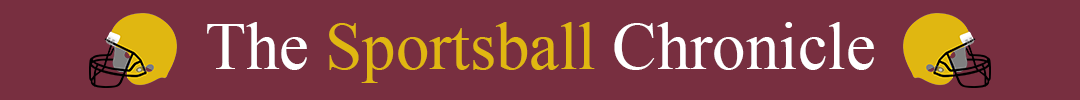
<style>
.page{position:relative;width:1080px;height:100px;background:#782f40}
.page>*{position:absolute;margin:0}
.t1{font:66.7px "TimesNewRomanPSMT";color:#e0b711}
.t2{font:66.7px "TimesNewRomanPSMT";color:#ffffff}
</style>
<div class="page">
<p class="t1" style="left:207px;top:22px;width:667px;height:61px"><span class="t2">The</span> Sportsball <span class="t2">Chronicle</span></p>
</div>
